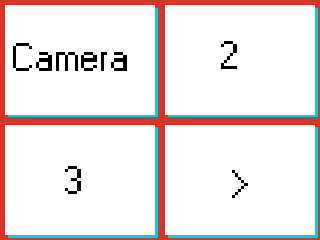
<style>
.page{position:relative;width:320px;height:240px;background:#ffffff}
.page>*{position:absolute;margin:0}
.t1{font:39.1px "W95FARegular";color:#000000}
</style>
<div class="page">
<p class="t1" style="left:221px;top:41px;width:16px;height:28px">2</p>
<p class="t1" style="left:13px;top:43px;width:114px;height:28px">Camera</p>
<p class="t1" style="left:65px;top:166px;width:16px;height:28px">3</p>
<p class="t1" style="left:232px;top:170px;width:16px;height:28px">&gt;</p>
</div>
